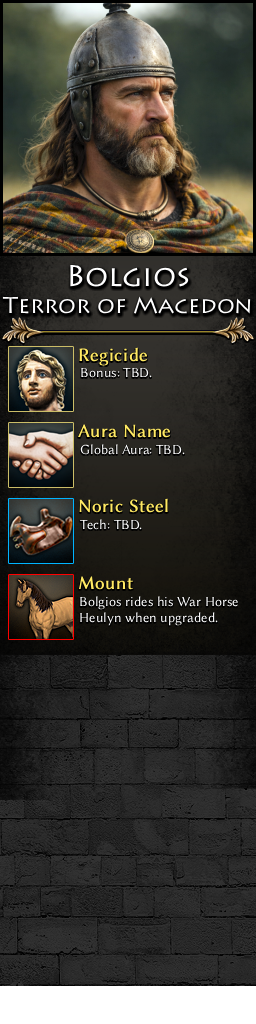
<style>
.page{position:relative;width:256px;height:1024px}
.page>*{position:absolute;margin:0}
.t1{font:23px/27px "Lithos";color:#ffffff}
.t2{font:30px/27px "Lithos";color:#ffffff}
.t3{font:19px "LinBiolinumO";color:#ffe963;font-weight:bold}
.t4{font:14px "LinBiolinumO";color:#ffffff}
</style>
<div class="page">
<p class="t1" style="left:2px;top:264px;width:249px;height:50px;text-align:center"><span class="t2">Bolgios<br></span>Terror of Macedon</p>
<p class="t3" style="left:79px;top:347px;width:69px;height:19px">Regicide</p>
<p class="t4" style="left:81px;top:367px;width:71px;height:11px">Bonus: TBD.</p>
<p class="t3" style="left:78px;top:424px;width:93px;height:14px">Aura Name</p>
<p class="t4" style="left:80px;top:444px;width:105px;height:11px">Global Aura: TBD.</p>
<p class="t3" style="left:79px;top:498px;width:89px;height:15px">Noric Steel</p>
<p class="t4" style="left:80px;top:519px;width:62px;height:11px">Tech: TBD.</p>
<p class="t3" style="left:78px;top:576px;width:55px;height:14px">Mount</p>
<p class="t4" style="left:80px;top:596px;width:158px;height:30px">Bolgios rides his War Horse<br>Heulyn when upgraded.</p>
</div>
